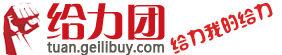
<style>
.page{position:relative;width:282px;height:55px;background:#ffffff}
.page>*{position:absolute;margin:0}
.t1{font:40px "GJJCQJW--GB1-0";color:#cc141d}
.t2{font:18px "SXSLST";color:#dc2321}
.t3{font:14px "MicrosoftYaHei";color:#5f5b53;font-weight:bold;scale:0.94 1}
</style>
<div class="page">
<p class="t1" style="left:47px;top:3px;width:118px;height:37px">给力团</p>
<p class="t2" style="left:170px;top:3px;width:103px;height:51px;rotate:-21deg">给力我的给力</p>
<p class="t3" style="left:47px;top:41px;width:117px;height:15px">tuan.geilibuy.com</p>
</div>
